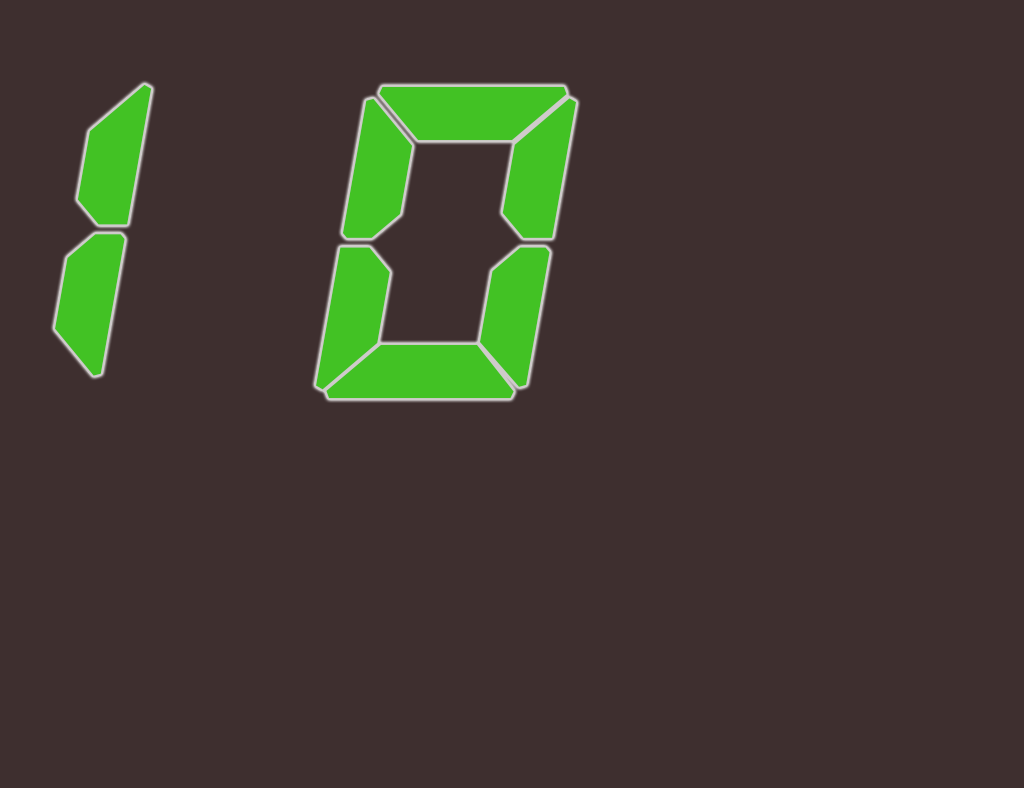
<style>
.page{position:relative;width:1024px;height:788px;background:#3e2f2f}
.page>*{position:absolute;margin:0}
.t1{font:432.7px "QuartzMS";letter-spacing:-0.025em;color:#42c224;text-transform:uppercase;font-weight:bold;font-style:italic}
</style>
<div class="page">
<p class="t1" style="left:55px;top:84px;width:97px;height:292px">1</p>
<p class="t1" style="left:316px;top:86px;width:261px;height:313px">0</p>
</div>
